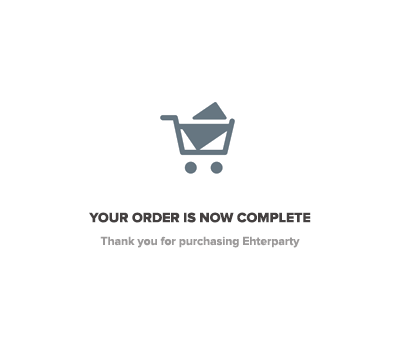
<style>
.page{position:relative;width:400px;height:352px;background:#ffffff}
.page>*{position:absolute;margin:0}
.t1{font:14px "ProximaNova-Extrabld";color:#444040;text-transform:uppercase}
.t2{font:12px "ProximaNova-Bold";color:#9c9a9a}
</style>
<div class="page">
<p class="t1" style="left:89px;top:212px;width:222px;height:11px">YOUR ORDER IS NOW COMPLETE</p>
<p class="t2" style="left:100px;top:236px;width:200px;height:12px">Thank you for purchasing Ehterparty</p>
</div>
